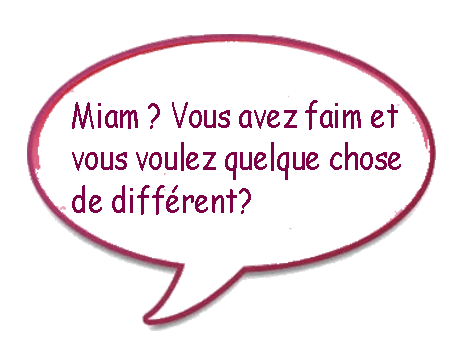
<style>
.page{position:relative;width:450px;height:339px;background:#ffffff}
.page>*{position:absolute;margin:0}
.t1{font:35.5px "ComicSansMS";color:#7b0046;scale:0.79 1}
</style>
<div class="page">
<p class="t1" style="left:72px;top:100px;width:329px;height:115px">Miam ? Vous avez faim et<br>vous voulez quelque chose<br>de différent?</p>
</div>
